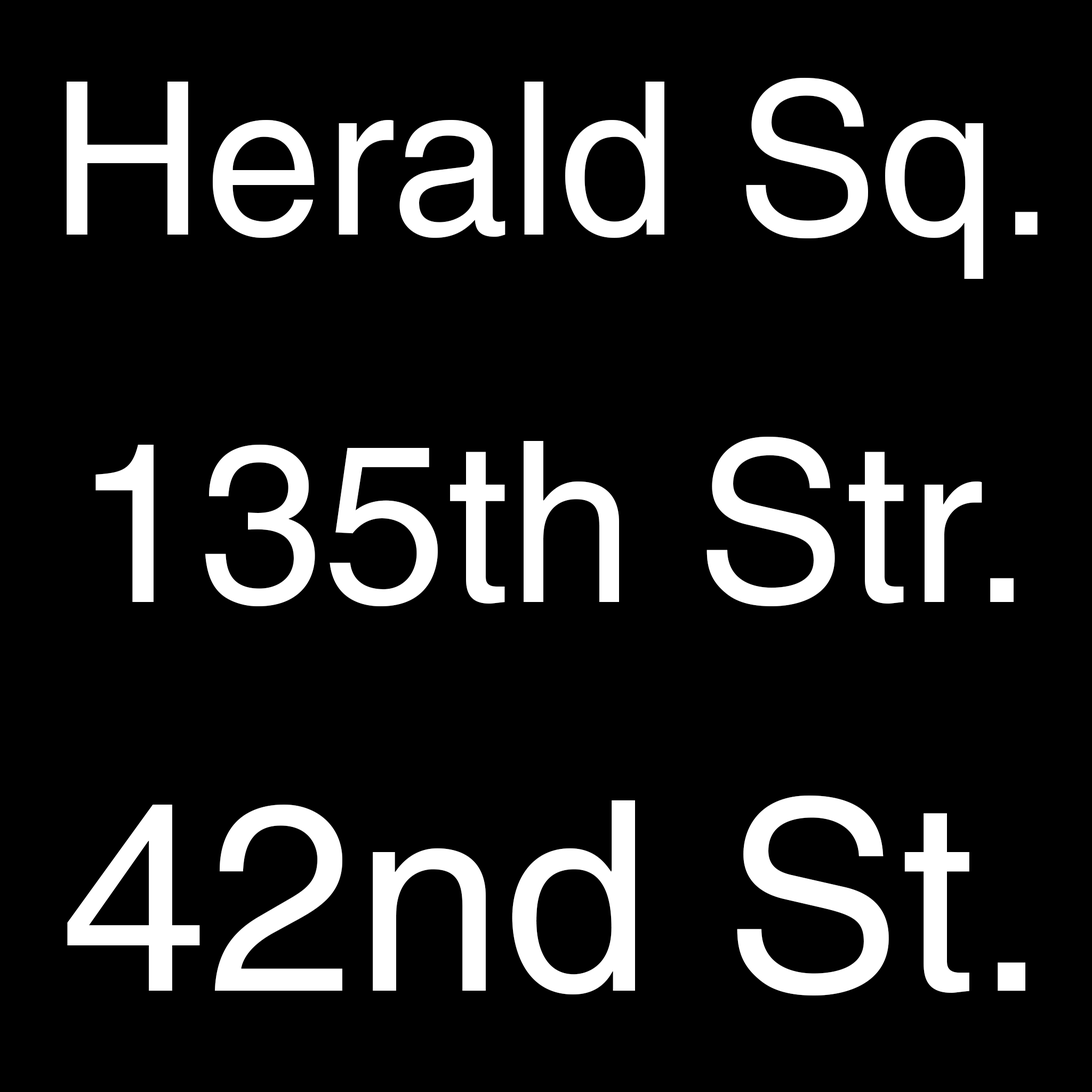
<style>
.page{position:relative;width:1092px;height:1092px;background:#000000}
.page>*{position:absolute;margin:0}
.t1{font:213.3px "Helvetica";color:#ffffff}
.t2{font:223.9px "Helvetica";color:#ffffff}
.t3{font:265.2px "Helvetica";color:#ffffff}
</style>
<div class="page">
<p class="t1" style="left:67px;top:77px;width:971px;height:202px">Herald Sq.</p>
<p class="t2" style="left:95px;top:437px;width:919px;height:170px">135th Str.</p>
<p class="t3" style="left:67px;top:796px;width:958px;height:199px">42nd St.</p>
</div>
